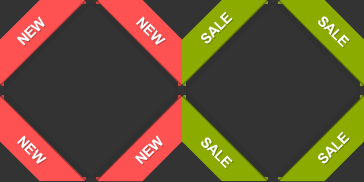
<style>
.page{position:relative;width:364px;height:182px;background:#333333}
.page>*{position:absolute;margin:0}
.t1{font:14px "Arial-BoldMT";color:#ffffff;text-transform:uppercase}
</style>
<div class="page">
<p class="t1" style="left:16px;top:16px;width:29px;height:30px;rotate:-45deg">new</p>
<p class="t1" style="left:136px;top:16px;width:30px;height:29px;rotate:45deg">new</p>
<p class="t1" style="left:201px;top:11px;width:32px;height:33px;rotate:-45deg">sale</p>
<p class="t1" style="left:318px;top:16px;width:32px;height:32px;rotate:45deg">sale</p>
<p class="t1" style="left:17px;top:135px;width:30px;height:29px;rotate:45deg">new</p>
<p class="t1" style="left:134px;top:135px;width:29px;height:30px;rotate:-45deg">new</p>
<p class="t1" style="left:201px;top:137px;width:32px;height:32px;rotate:45deg">sale</p>
<p class="t1" style="left:318px;top:131px;width:32px;height:33px;rotate:-45deg">sale</p>
</div>
